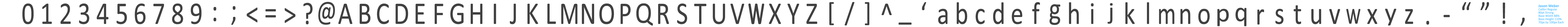
<style>
.page{position:relative;width:1568px;height:27px;background:#ffffff}
.page>*{position:absolute;margin:0}
.t1{font:31.3px "Calibri";color:#404040;scale:0.82 1}
.t2{font:29.3px "Calibri";color:#404040;scale:0.78 1}
.t3{font:31.3px "Calibri";color:#404040;scale:0.75 1}
.t4{font:29.9px "Calibri";color:#404040;scale:0.86 1}
.t5{font:30.7px "Calibri";color:#404040;font-weight:bold;scale:0.59 1}
.t6{font:27px "Calibri";color:#404040;scale:0.95 1}
.t7{font:24.5px "Calibri";color:#404040;scale:1.05 1}
.t8{font:3.2px/3.2px "Calibri";color:#61c2ff}
.t9{font:3.9px/3.2px "Calibri-Bold";color:#61c2ff}
.t10{font:26.2px "Calibri";color:#404040;scale:1.07 1}
.t11{font:27.9px "Calibri";color:#404040;scale:0.96 1}
.t12{font:30.9px "Calibri";color:#404040;scale:0.68 1}
.t13{font:25.6px "Calibri";color:#404040;scale:1.04 1}
</style>
<div class="page">
<p class="t1" style="left:22px;top:3px;width:12px;height:21px">0</p>
<p class="t1" style="left:42px;top:3px;width:10px;height:21px">1</p>
<p class="t1" style="left:61px;top:3px;width:10px;height:21px">2</p>
<p class="t1" style="left:79px;top:3px;width:10px;height:21px">3</p>
<p class="t1" style="left:97px;top:3px;width:12px;height:21px">4</p>
<p class="t1" style="left:117px;top:4px;width:10px;height:20px">5</p>
<p class="t1" style="left:135px;top:3px;width:11px;height:21px">6</p>
<p class="t1" style="left:153px;top:4px;width:11px;height:20px">7</p>
<p class="t1" style="left:172px;top:3px;width:11px;height:21px">8</p>
<p class="t1" style="left:191px;top:3px;width:11px;height:21px">9</p>
<p class="t1" style="left:231px;top:6px;width:4px;height:19px">;</p>
<p class="t1" style="left:303px;top:3px;width:10px;height:21px">?</p>
<p class="t2" style="left:318px;top:2px;width:17px;height:23px">@</p>
<p class="t1" style="left:338px;top:3px;width:15px;height:21px">A</p>
<p class="t1" style="left:359px;top:4px;width:11px;height:20px">B</p>
<p class="t1" style="left:377px;top:3px;width:12px;height:21px">C</p>
<p class="t1" style="left:395px;top:4px;width:13px;height:20px">D</p>
<p class="t1" style="left:415px;top:4px;width:10px;height:20px">E</p>
<p class="t1" style="left:435px;top:4px;width:8px;height:20px">F</p>
<p class="t1" style="left:450px;top:3px;width:14px;height:21px">G</p>
<p class="t1" style="left:471px;top:3px;width:11px;height:21px">H</p>
<p class="t1" style="left:494px;top:3px;width:2px;height:21px">I</p>
<p class="t1" style="left:510px;top:3px;width:6px;height:21px">J</p>
<p class="t1" style="left:527px;top:3px;width:11px;height:21px">K</p>
<p class="t1" style="left:547px;top:3px;width:9px;height:21px">L</p>
<p class="t3" style="left:561px;top:4px;width:17px;height:20px">M</p>
<p class="t1" style="left:582px;top:4px;width:12px;height:20px">N</p>
<p class="t1" style="left:599px;top:3px;width:15px;height:21px">O</p>
<p class="t1" style="left:621px;top:4px;width:10px;height:20px">P</p>
<p class="t4" style="left:636px;top:3px;width:17px;height:22px">Q</p>
<p class="t1" style="left:658px;top:4px;width:11px;height:20px">R</p>
<p class="t1" style="left:677px;top:3px;width:10px;height:21px">S</p>
<p class="t1" style="left:694px;top:4px;width:12px;height:20px">T</p>
<p class="t1" style="left:713px;top:3px;width:12px;height:21px">U</p>
<p class="t1" style="left:730px;top:3px;width:14px;height:21px">V</p>
<p class="t5" style="left:748px;top:3px;width:16px;height:21px">W</p>
<p class="t1" style="left:769px;top:3px;width:12px;height:21px">X</p>
<p class="t1" style="left:787px;top:3px;width:12px;height:21px">Y</p>
<p class="t1" style="left:806px;top:4px;width:11px;height:20px">Z</p>
<p class="t6" style="left:829px;top:2px;width:5px;height:23px">[</p>
<p class="t6" style="left:845px;top:2px;width:9px;height:23px">/</p>
<p class="t6" style="left:865px;top:2px;width:4px;height:23px">]</p>
<p class="t1" style="left:882px;top:3px;width:10px;height:12px">^</p>
<p class="t1" style="left:922px;top:2px;width:4px;height:8px">‘</p>
<p class="t1" style="left:957px;top:2px;width:10px;height:22px">b</p>
<p class="t1" style="left:993px;top:2px;width:11px;height:22px">d</p>
<p class="t1" style="left:1032px;top:2px;width:8px;height:22px">f</p>
<p class="t1" style="left:1049px;top:4px;width:11px;height:21px">g</p>
<p class="t1" style="left:1069px;top:2px;width:10px;height:22px">h</p>
<p class="t1" style="left:1091px;top:3px;width:3px;height:21px">i</p>
<p class="t7" style="left:1107px;top:3px;width:6px;height:20px">j</p>
<p class="t1" style="left:1125px;top:2px;width:10px;height:22px">k</p>
<p class="t1" style="left:1147px;top:2px;width:2px;height:22px">l</p>
<p class="t1" style="left:1294px;top:5px;width:7px;height:19px">t</p>
<p class="t1" style="left:1462px;top:2px;width:9px;height:8px">“</p>
<p class="t1" style="left:1480px;top:2px;width:9px;height:8px">”</p>
<p class="t1" style="left:1502px;top:2px;width:3px;height:22px">!</p>
<p class="t8" style="left:1538px;top:4px;width:26px;height:20px"><span class="t9">Jason Weber<br></span>Calibri Regular<br>80pt Strong<br>Base Width 88%<br>Base Height 110%<br>70px by 100px Each</p>
<p class="t1" style="left:213px;top:7px;width:3px;height:14px">:</p>
<p class="t1" style="left:247px;top:7px;width:11px;height:15px">&lt;</p>
<p class="t1" style="left:265px;top:9px;width:11px;height:8px">=</p>
<p class="t1" style="left:285px;top:8px;width:10px;height:15px">&gt;</p>
<p class="t1" style="left:938px;top:9px;width:9px;height:15px">a</p>
<p class="t1" style="left:975px;top:9px;width:10px;height:15px">c</p>
<p class="t1" style="left:1012px;top:9px;width:10px;height:15px">e</p>
<p class="t3" style="left:1159px;top:9px;width:15px;height:15px">m</p>
<p class="t1" style="left:1180px;top:9px;width:10px;height:15px">n</p>
<p class="t1" style="left:1198px;top:9px;width:12px;height:15px">o</p>
<p class="t10" style="left:1217px;top:9px;width:12px;height:17px">p</p>
<p class="t11" style="left:1235px;top:7px;width:11px;height:19px">q</p>
<p class="t1" style="left:1257px;top:9px;width:7px;height:15px">r</p>
<p class="t1" style="left:1275px;top:9px;width:8px;height:15px">s</p>
<p class="t1" style="left:1311px;top:9px;width:10px;height:15px">u</p>
<p class="t1" style="left:1329px;top:9px;width:11px;height:15px">v</p>
<p class="t12" style="left:1346px;top:9px;width:15px;height:14px">w</p>
<p class="t1" style="left:1367px;top:9px;width:10px;height:15px">x</p>
<p class="t13" style="left:1385px;top:9px;width:11px;height:16px">y</p>
<p class="t1" style="left:1405px;top:9px;width:8px;height:15px">z</p>
<p class="t1" style="left:1443px;top:15px;width:7px;height:2px">-</p>
<p class="t1" style="left:1521px;top:17px;width:4px;height:8px">,</p>
<p class="t1" style="left:898px;top:22px;width:14px;height:3px">_</p>
<p class="t1" style="left:1426px;top:21px;width:3px;height:3px">.</p>
</div>
